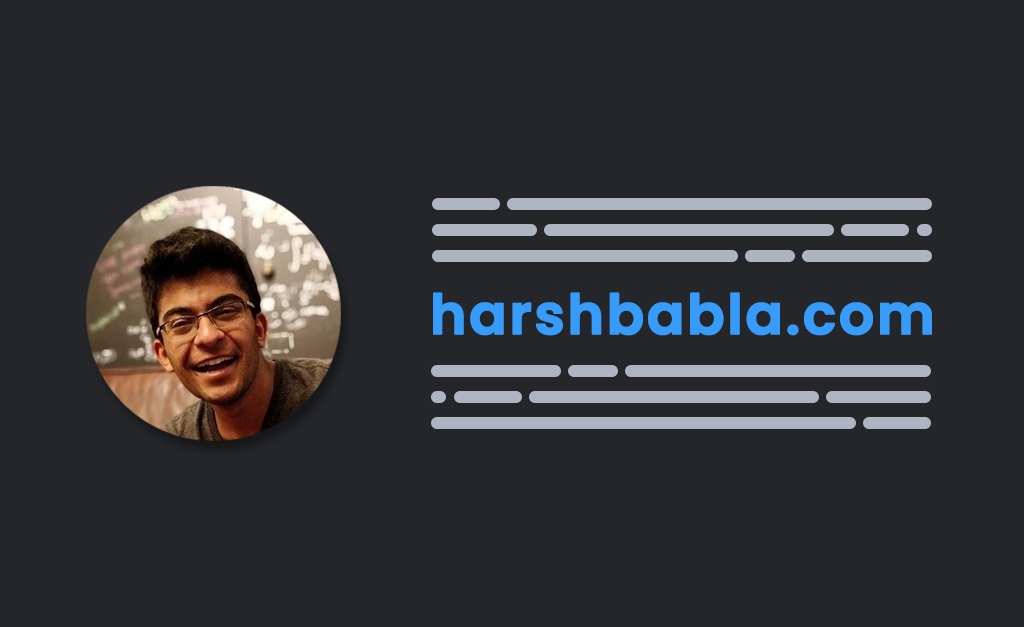
<style>
.page{position:relative;width:1024px;height:627px;background:#252629}
.page>*{position:absolute;margin:0}
.t1{font:55px "Poppins-SemiBold";letter-spacing:0.026em;color:#379bf9;font-weight:bold}
</style>
<div class="page">
<p class="t1" style="left:433px;top:292px;width:499px;height:44px">harshbabla.com</p>
</div>
